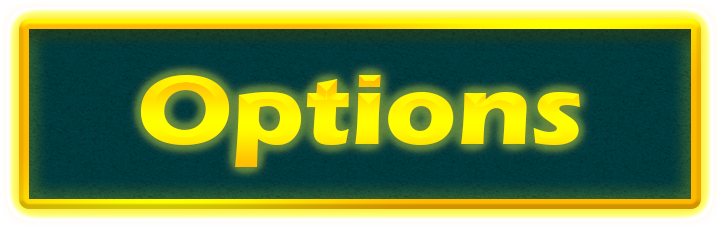
<style>
.page{position:relative;width:721px;height:229px}
.page>*{position:absolute;margin:0}
.t1{font:101.6px "ErasITC-Bold";color:#fffc00;scale:1.08 1}
</style>
<div class="page">
<p class="t1" style="left:140px;top:75px;width:440px;height:92px">Options</p>
</div>
